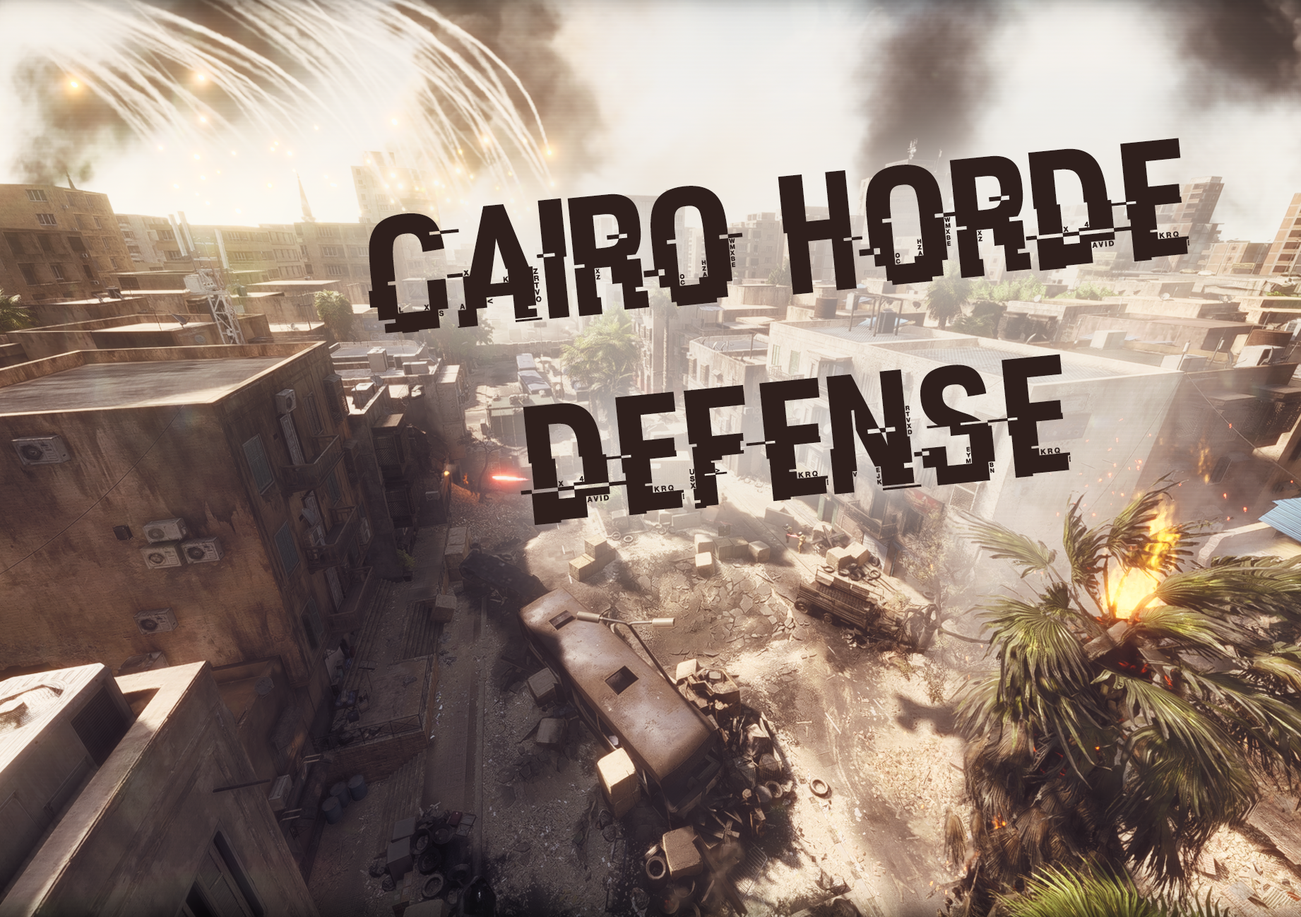
<style>
.page{position:relative;width:1301px;height:917px}
.page>*{position:absolute;margin:0}
.t1{font:169.5px "HACKED";color:#2f201d}
</style>
<div class="page">
<p class="t1" style="left:368px;top:138px;width:821px;height:387px;text-align:center;rotate:-6deg">CAIRO HORDE<br>DEFENSE</p>
</div>
